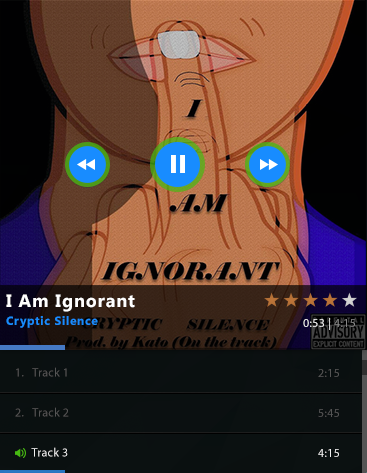
<style>
.page{position:relative;width:367px;height:473px}
.page>*{position:absolute;margin:0}
.t1{font:12px/18px "SegoeUI-Bold";letter-spacing:0.05em;color:#188cff}
.t2{font:18px/18px "SegoeUI-Bold";letter-spacing:0.05em;color:#ffffff}
.t3{font:12px "MyriadPro-Regular";letter-spacing:0.025em;color:#ffffff}
.t4{font:12px "MyriadPro-Regular";letter-spacing:0.025em;color:#888888}
.t5{font:12px/40px "MyriadPro-Regular";letter-spacing:0.025em;color:#555555}
.t6{font:12px/40px "MyriadPro-Regular";letter-spacing:0.025em;color:#f1f1f1}
.t7{font:12px/40px "MyriadPro-Regular";letter-spacing:0.025em;color:#f0f0f0}
</style>
<div class="page">
<p class="t1" style="left:6px;top:294px;width:129px;height:34px"><span class="t2">I Am Ignorant<br></span>Cryptic Silence</p>
<p class="t3" style="left:303px;top:318px;width:52px;height:12px">0:53 | <span class="t4">4:15</span></p>
<p class="t5" style="left:15px;top:367px;width:54px;height:90px">1.   Track 1<br>2.   Track 2<br><span class="t6">      Track 3</span></p>
<p class="t5" style="left:318px;top:369px;width:21px;height:88px">2:15<br>5:45<br><span class="t7">4:15</span></p>
</div>
